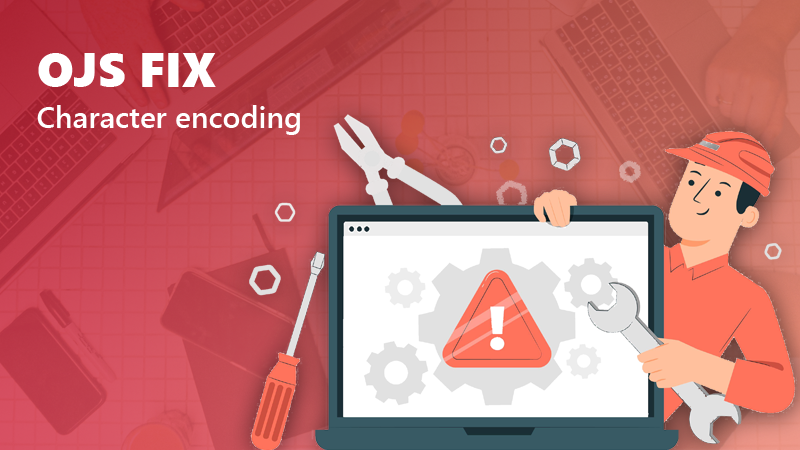
<style>
.page{position:relative;width:800px;height:450px}
.page>*{position:absolute;margin:0}
.t1{font:48px "SegoeUIBlack";color:#ffffff}
.t2{font:30px "SegoeUI-Semibold";color:#ffffff}
</style>
<div class="page">
<p class="t1" style="left:38px;top:53px;width:178px;height:34px">OJS FIX</p>
<p class="t2" style="left:37px;top:105px;width:263px;height:30px">Character encoding</p>
</div>
